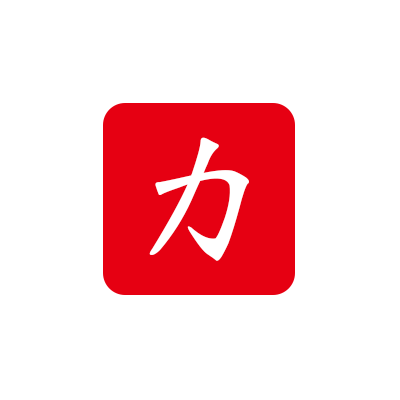
<style>
.page{position:relative;width:400px;height:400px;background:#ffffff}
.page>*{position:absolute;margin:0}
.t1{font:156.1px "Weibei-SC-Bold";color:#ffffff}
</style>
<div class="page">
<p class="t1" style="left:149px;top:137px;width:100px;height:124px">力</p>
</div>
